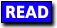
<style>
.page{position:relative;width:57px;height:28px;background:#1200ff}
.page>*{position:absolute;margin:0}
.t1{font:18px "GillSans-Bold";color:#ffffff;scale:0.8 1}
</style>
<div class="page">
<p class="t1" style="left:6px;top:5px;width:43px;height:13px">READ</p>
</div>
